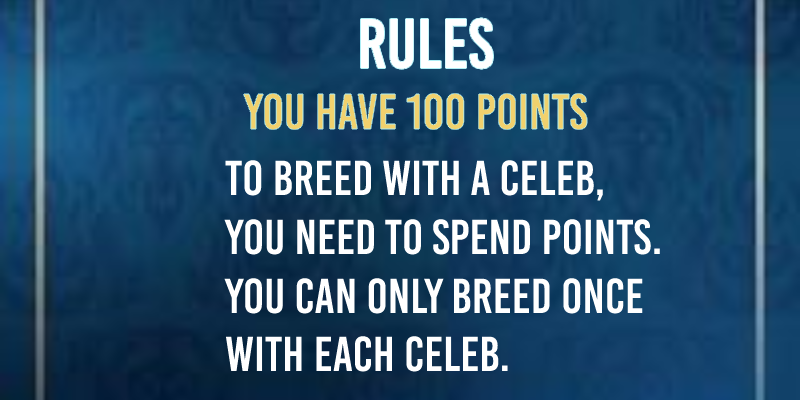
<style>
.page{position:relative;width:800px;height:400px}
.page>*{position:absolute;margin:0}
.t1{font:70px "BebasKai";color:#ffffff}
.t2{font:50px "BebasKai";color:#f1d16d}
.t3{font:49px "BebasKai";color:#ffffff}
</style>
<div class="page">
<p class="t1" style="left:360px;top:18px;width:134px;height:51px">Rules</p>
<p class="t2" style="left:243px;top:93px;width:345px;height:37px">You have 100 points</p>
<p class="t3" style="left:224px;top:160px;width:436px;height:212px">To breed with a celeb, <br>you need to spend points.<br>You can only breed once <br>with each celeb.</p>
</div>
